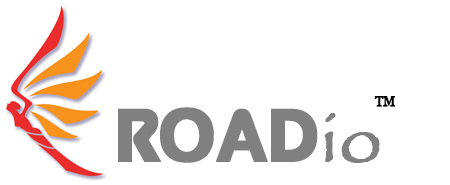
<style>
.page{position:relative;width:450px;height:185px;background:#ffffff}
.page>*{position:absolute;margin:0}
.t1{font:12.5px "Georgia";color:#000000;font-weight:bold}
.t2{font:76.4px "Queen-of-Camelot";color:#808080;font-weight:bold}
.t3{font:76.4px "Papyrus-Regular";color:#808080;font-weight:bold}
</style>
<div class="page">
<p class="t1" style="left:374px;top:96px;width:21px;height:11px">TM</p>
<p class="t2" style="left:118px;top:107px;width:262px;height:56px">Road<span class="t3">io</span></p>
</div>
